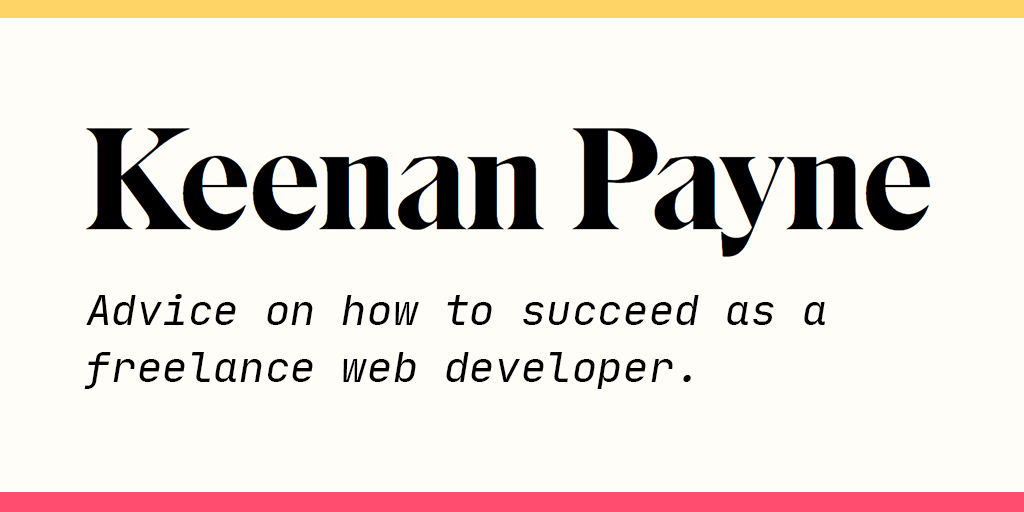
<style>
.page{position:relative;width:1024px;height:512px;background:#fffdf7}
.page>*{position:absolute;margin:0}
.t1{font:40.8px/57.1px "JetBrainsMono-Italic";color:#000000;scale:1.05 1}
</style>
<div class="page">
<p class="t1" style="left:84px;top:294px;width:741px;height:95px">Advice on how to succeed as a <br>freelance web developer.</p>
</div>
